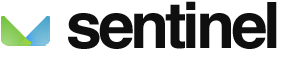
<style>
.page{position:relative;width:296px;height:62px;background:#ffffff}
.page>*{position:absolute;margin:0}
.t1{font:64px "Helvetica-Bold";letter-spacing:-0.06em;color:#0f0f0f}
</style>
<div class="page">
<p class="t1" style="left:68px;top:1px;width:209px;height:48px">sentinel</p>
</div>
